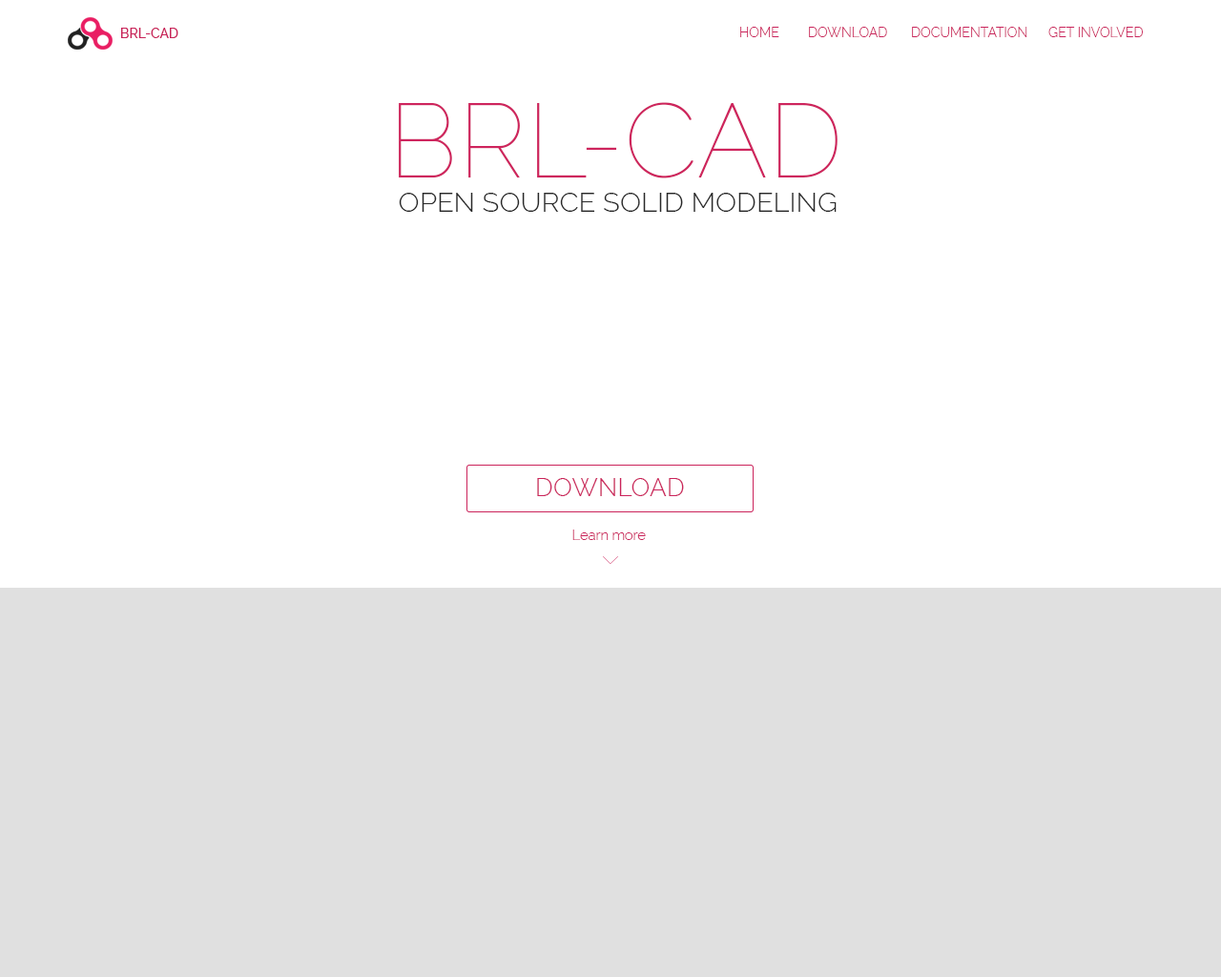
<style>
.page{position:relative;width:1221px;height:977px;background:#ffffff}
.page>*{position:absolute;margin:0}
.t1{font:13.4px "Raleway-Medium";color:#c9235a}
.t2{font:13.4px "Raleway-Light";color:#ca235b}
.t3{font:105.1px "Raleway-Thin";color:#ce245d}
.t4{font:27.7px "Raleway-Light";color:#282828}
.t5{font:25.2px "Raleway-Light";color:#cb235b}
.t6{font:13.9px "Raleway-Light";color:#cb235b}
</style>
<div class="page">
<p class="t1" style="left:121px;top:28px;width:57px;height:10px">BRL-CAD</p>
<p class="t2" style="left:740px;top:27px;width:403px;height:10px">HOME DOWNLOAD DOCUMENTATION GET INVOLVED</p>
<p class="t3" style="left:399px;top:102px;width:438px;height:76px">BRL-CAD</p>
<p class="t4" style="left:399px;top:193px;width:437px;height:19px">OPEN SOURCE SOLID MODELING</p>
<p class="t5" style="left:537px;top:478px;width:147px;height:18px">DOWNLOAD</p>
<p class="t6" style="left:572px;top:529px;width:74px;height:11px">Learn more</p>
</div>
